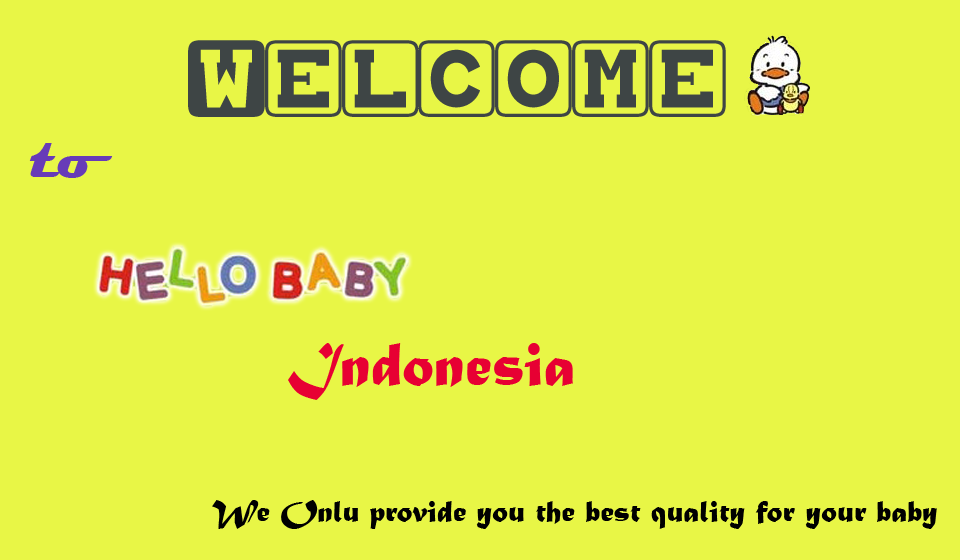
<style>
.page{position:relative;width:960px;height:560px;background:#e8f646}
.page>*{position:absolute;margin:0}
.t1{font:64px "babybloc";color:#3e4545}
.t2{font:64px "Magneto-Bold";color:#673bb8}
.t3{font:64px "MaturaMTScriptCapitals";color:#e70033}
.t4{font:32px "MaturaMTScriptCapitals";color:#000000}
</style>
<div class="page">
<p class="t1" style="left:188px;top:40px;width:538px;height:77px">wELCOME</p>
<p class="t2" style="left:29px;top:143px;width:84px;height:35px">to</p>
<p class="t3" style="left:288px;top:343px;width:285px;height:57px">Indonesia</p>
<p class="t4" style="left:212px;top:500px;width:725px;height:29px">We Onlu provide you the best quality for your baby</p>
</div>
